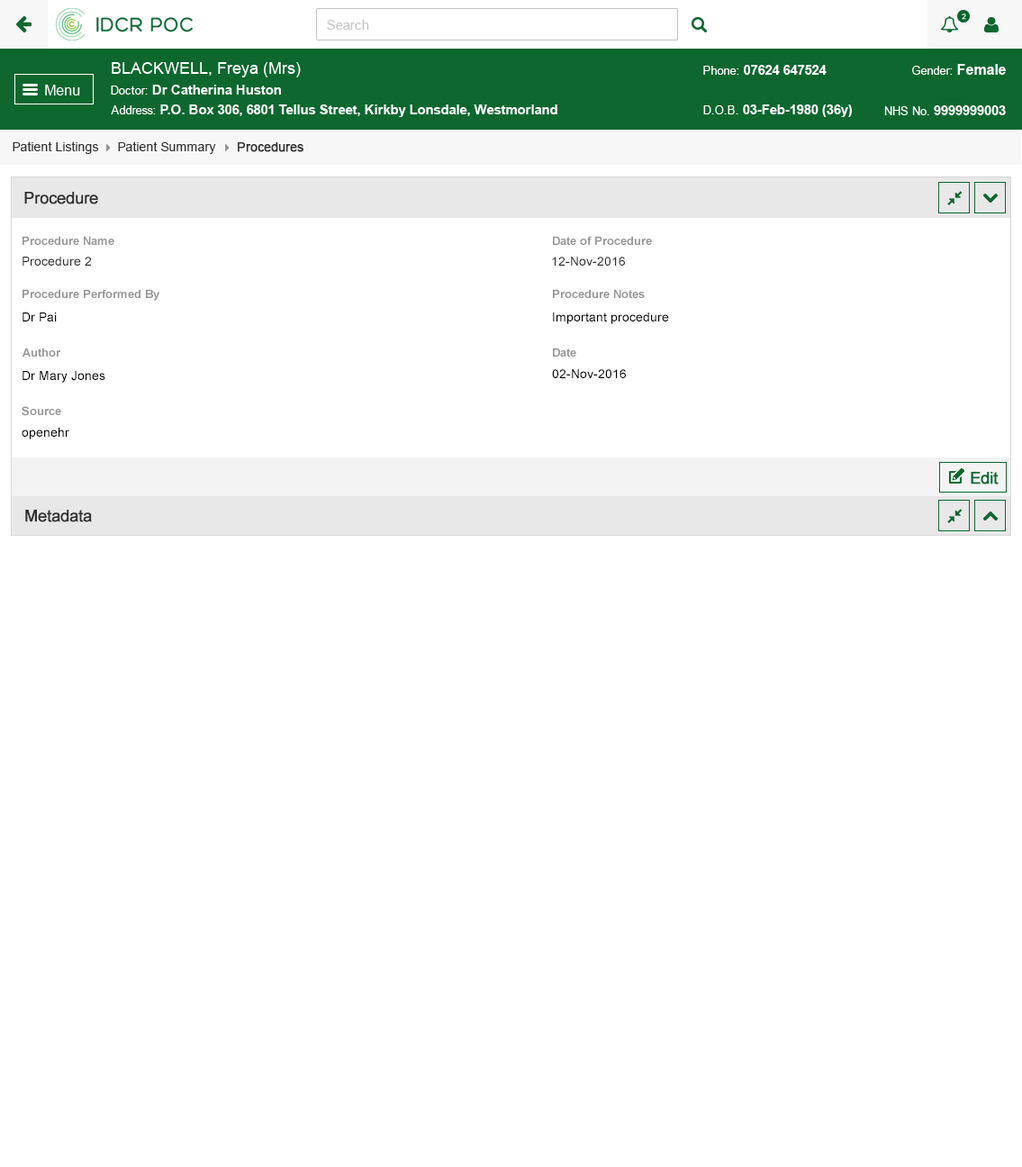
<style>
.page{position:relative;width:1022px;height:1167px;background:#ffffff}
.page>*{position:absolute;margin:0}
.t1{font:12.6px "ArialMT";color:#313131}
.t2{font:12.6px "ArialMT";color:#313131;font-weight:bold}
.t3{font:16.2px "ArialMT";color:#303030;font-weight:bold}
.t4{font:11.7px "Arial-BoldMT";color:#959595}
.t5{font:12.6px "ArialMT";color:#303030}
.t6{font:12.6px "ArialMT";color:#000000}
</style>
<div class="page">
<p class="t1" style="left:13px;top:141px;width:86px;height:13px">Patient Listings</p>
<p class="t1" style="left:118px;top:141px;width:98px;height:13px">Patient Summary</p>
<p class="t2" style="left:238px;top:142px;width:65px;height:10px">Procedures</p>
<p class="t3" style="left:24px;top:192px;width:74px;height:12px">Procedure</p>
<p class="t4" style="left:23px;top:236px;width:91px;height:9px">Procedure Name</p>
<p class="t4" style="left:553px;top:236px;width:99px;height:9px">Date of Procedure</p>
<p class="t5" style="left:23px;top:257px;width:68px;height:9px">Procedure 2</p>
<p class="t5" style="left:552px;top:257px;width:73px;height:9px">12-Nov-2016</p>
<p class="t4" style="left:23px;top:289px;width:136px;height:12px">Procedure Performed By</p>
<p class="t4" style="left:553px;top:289px;width:92px;height:9px">Procedure Notes</p>
<p class="t6" style="left:23px;top:312px;width:34px;height:9px">Dr Pai</p>
<p class="t6" style="left:553px;top:312px;width:116px;height:12px">Important procedure</p>
<p class="t4" style="left:23px;top:348px;width:38px;height:9px">Author</p>
<p class="t4" style="left:553px;top:348px;width:23px;height:9px">Date</p>
<p class="t6" style="left:23px;top:371px;width:82px;height:12px">Dr Mary Jones</p>
<p class="t6" style="left:552px;top:369px;width:74px;height:9px">02-Nov-2016</p>
<p class="t4" style="left:22px;top:406px;width:39px;height:10px">Source</p>
<p class="t6" style="left:22px;top:428px;width:47px;height:11px">openehr</p>
<p class="t3" style="left:25px;top:510px;width:67px;height:12px">Metadata</p>
</div>
